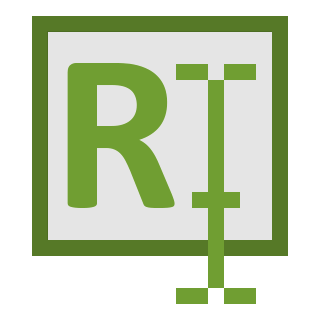
<style>
.page{position:relative;width:320px;height:320px;background:#ffffff}
.page>*{position:absolute;margin:0}
.t1{font:228px "Calibri-Bold";color:#709e32}
</style>
<div class="page">
<p class="t1" style="left:67px;top:63px;width:108px;height:145px">R</p>
</div>
